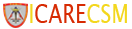
<style>
.page{position:relative;width:132px;height:29px;background:#ffffff}
.page>*{position:absolute;margin:0}
.t1{font:26.1px "LucidaSansUnicode";color:#d72b03;scale:0.78 1}
.t2{font:26.1px "LucidaSansUnicode";color:#f3d71e;scale:0.78 1}
</style>
<div class="page">
<p class="t1" style="left:30px;top:4px;width:97px;height:19px"><span class="t2"> I</span>CARE<span class="t2">CSM</span></p>
</div>
